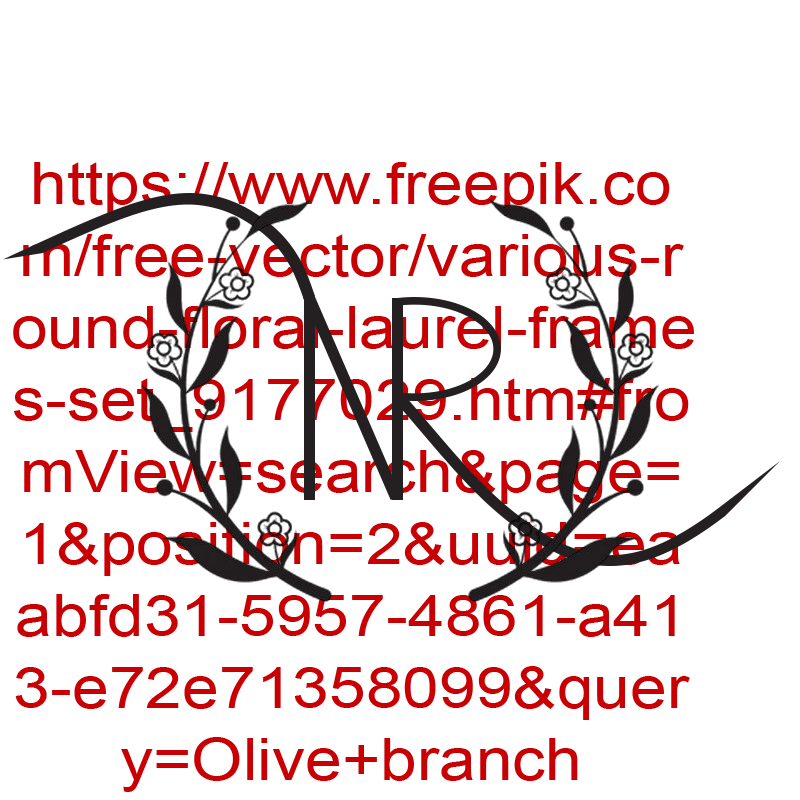
<style>
.page{position:relative;width:800px;height:800px;background:#ffffff}
.page>*{position:absolute;margin:0}
.t1{font:59.4px "ArialMT";color:#c80003;scale:1.11 1}
</style>
<div class="page">
<p class="t1" style="left:13px;top:162px;width:681px;height:630px;text-align:center">https://www.freepik.com/free-vector/various-round-floral-laurel-frames-set_9177029.htm#fromView=search&amp;page=1&amp;position=2&amp;uuid=eaabfd31-5957-4861-a413-e72e71358099&amp;query=Olive+branch</p>
</div>
